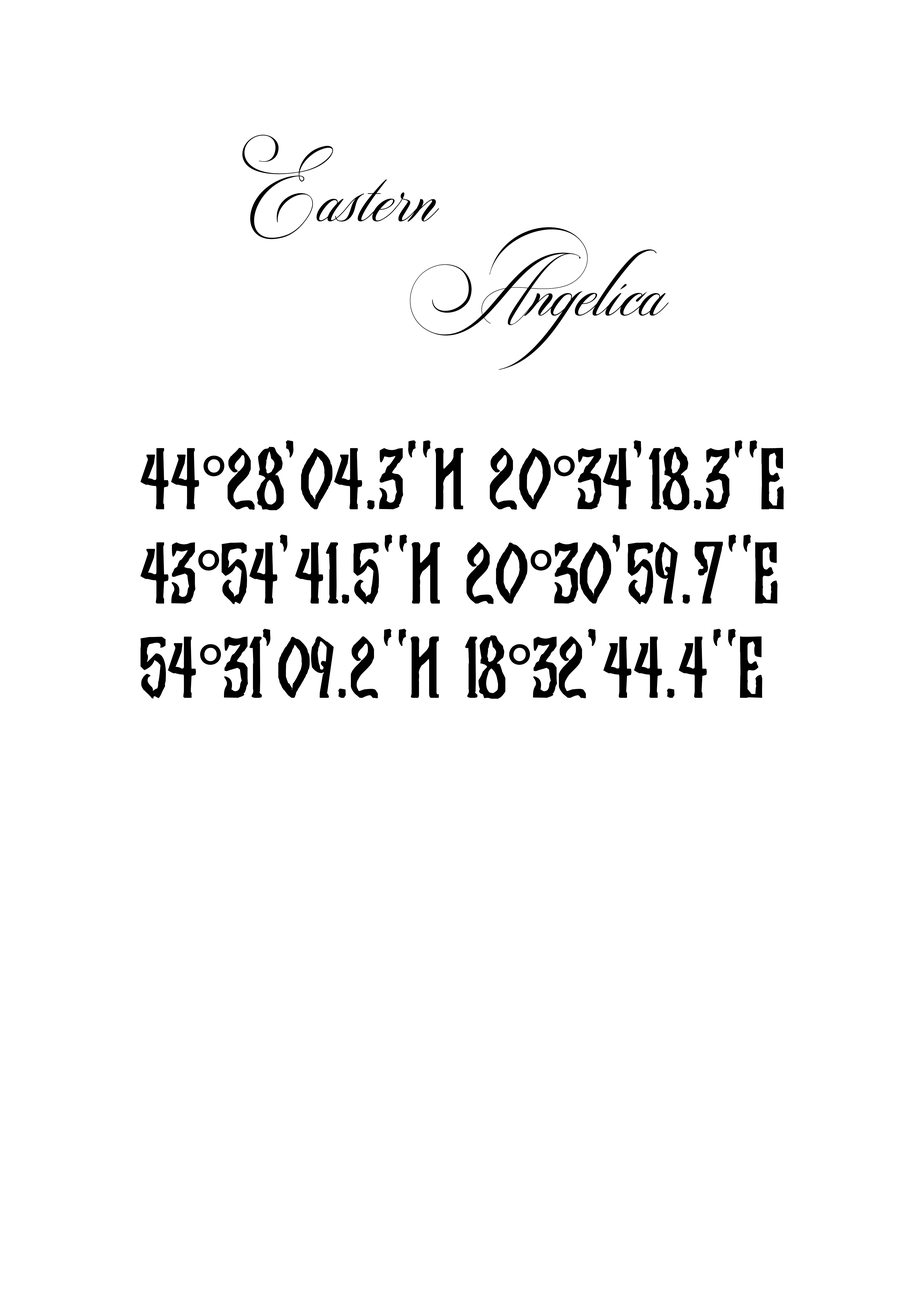
<style>
.page{position:relative;width:918px;height:1299px;background:#ffffff}
.page>*{position:absolute;margin:0}
.t1{font:78.5px "Switzerland";color:#000000}
.t2{font:78.5px "KremlinOrthodoxChurch";color:#000000}
.t3{font:78.5px "MyriadPro-Regular";color:#000000}
</style>
<div class="page">
<p class="t1" style="left:242px;top:135px;width:427px;height:235px">Eastern<br>       Angelica</p>
<p class="t2" style="left:140px;top:440px;width:644px;height:259px">44<span class="t3">°</span>28'04.3"N 20<span class="t3">°</span>34'18.3"E<br>43<span class="t3">°</span>54'41.5"N 20<span class="t3">°</span>30'59.7"E<br>54<span class="t3">°</span>31'09.2"N 18<span class="t3">°</span>32'44.4"E</p>
</div>
